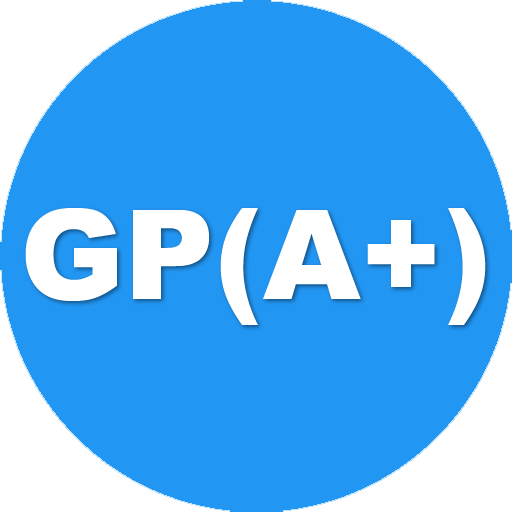
<style>
.page{position:relative;width:512px;height:512px;background:#2296f3}
.page>*{position:absolute;margin:0}
.t1{font:125px "Arial-Black";color:#ffffff}
</style>
<div class="page">
<p class="t1" style="left:25px;top:208px;width:461px;height:117px">GP(A+)</p>
</div>
